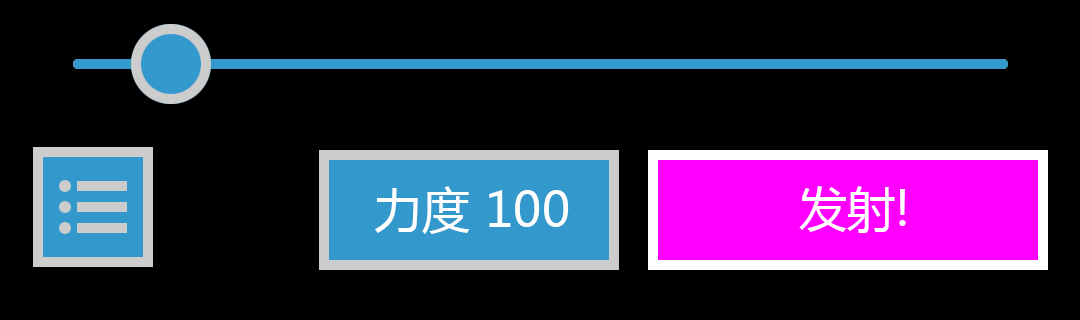
<style>
.page{position:relative;width:1080px;height:320px;background:#000000}
.page>*{position:absolute;margin:0}
.t1{font:48px "MicrosoftYaHei";letter-spacing:0.005em;color:#ffffff}
</style>
<div class="page">
<p class="t1" style="left:375px;top:186px;width:194px;height:48px">力度 100</p>
<p class="t1" style="left:799px;top:186px;width:107px;height:47px">发射!</p>
</div>
